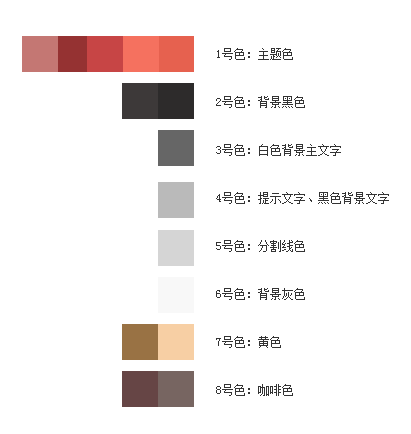
<style>
.page{position:relative;width:411px;height:434px;background:#ffffff}
.page>*{position:absolute;margin:0}
.t1{font:12px/48px "SimSun";color:#333333}
</style>
<div class="page">
<p class="t1" style="left:216px;top:48px;width:173px;height:348px">1号色：主题色<br>2号色：背景黑色<br>3号色：白色背景主文字<br>4号色：提示文字、黑色背景文字<br>5号色：分割线色<br>6号色：背景灰色<br>7号色：黄色<br>8号色：咖啡色</p>
</div>
